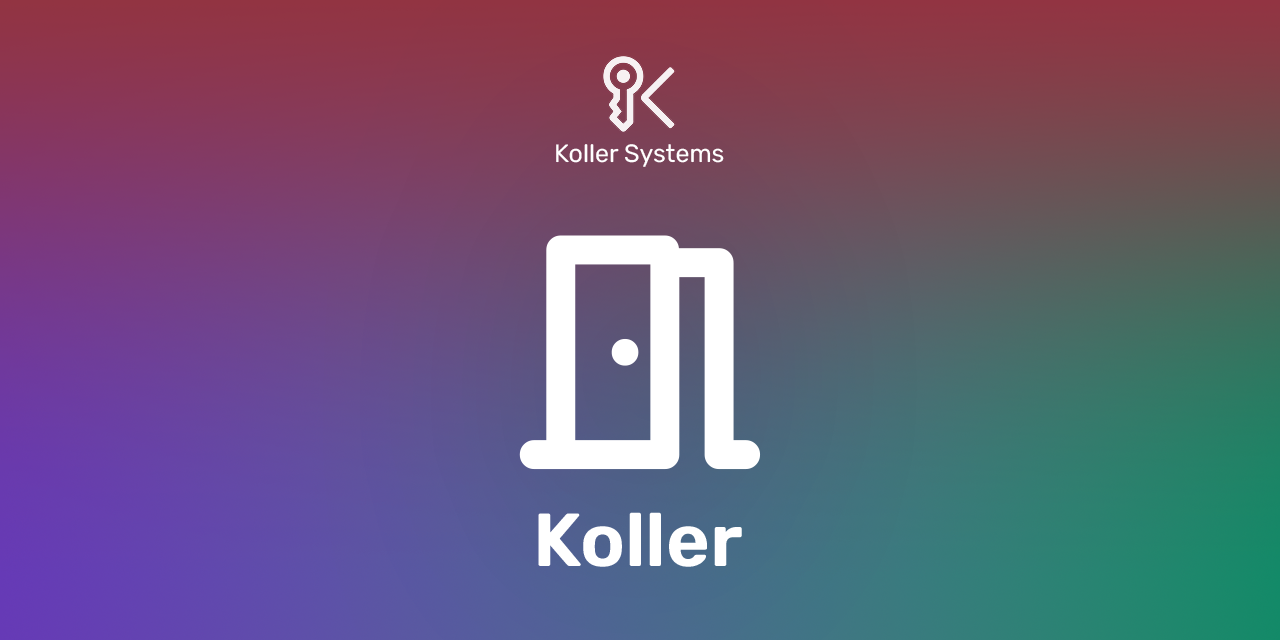
<style>
.page{position:relative;width:1280px;height:640px}
.page>*{position:absolute;margin:0}
.t1{font:25px "Rubik-Regular";color:#ffffff}
.t2{font:75px "Rubik-SemiBold";color:#ffffff}
</style>
<div class="page">
<p class="t1" style="left:556px;top:144px;width:168px;height:23px">Koller Systems</p>
<p class="t2" style="left:538px;top:512px;width:204px;height:55px">Koller</p>
</div>
